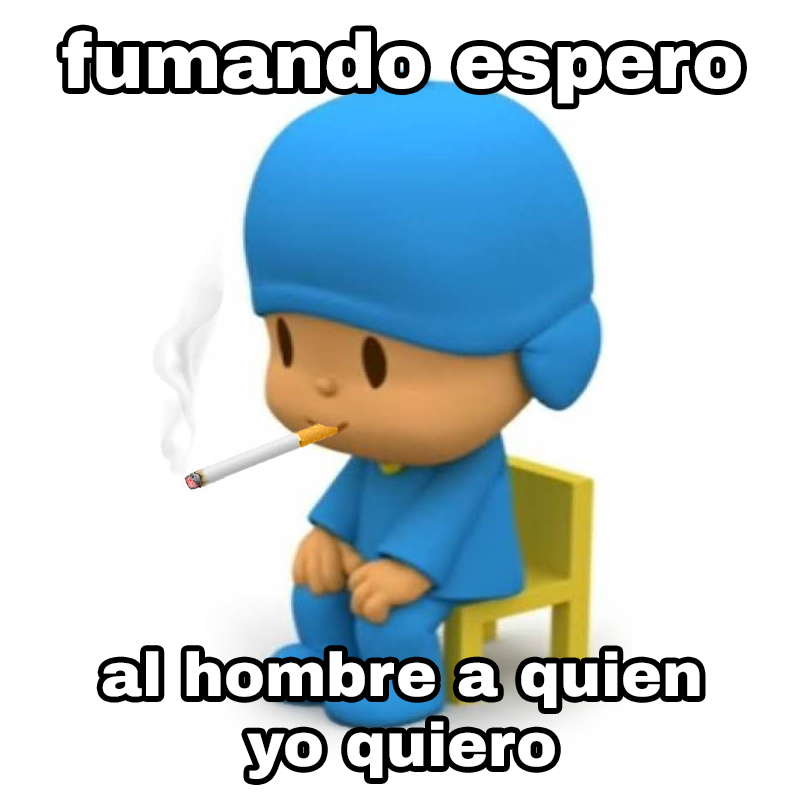
<style>
.page{position:relative;width:805px;height:805px;background:#ffffff}
.page>*{position:absolute;margin:0}
.t1{font:77.5px "ArchivoBlack-Regular";color:#ffffff}
.t2{font:61.5px "ArchivoBlack-Regular";color:#ffffff}
</style>
<div class="page">
<p class="t1" style="left:62px;top:30px;width:679px;height:74px">fumando espero</p>
<p class="t2" style="left:102px;top:651px;width:598px;height:128px;text-align:center">al hombre a quien<br>yo quiero</p>
</div>
